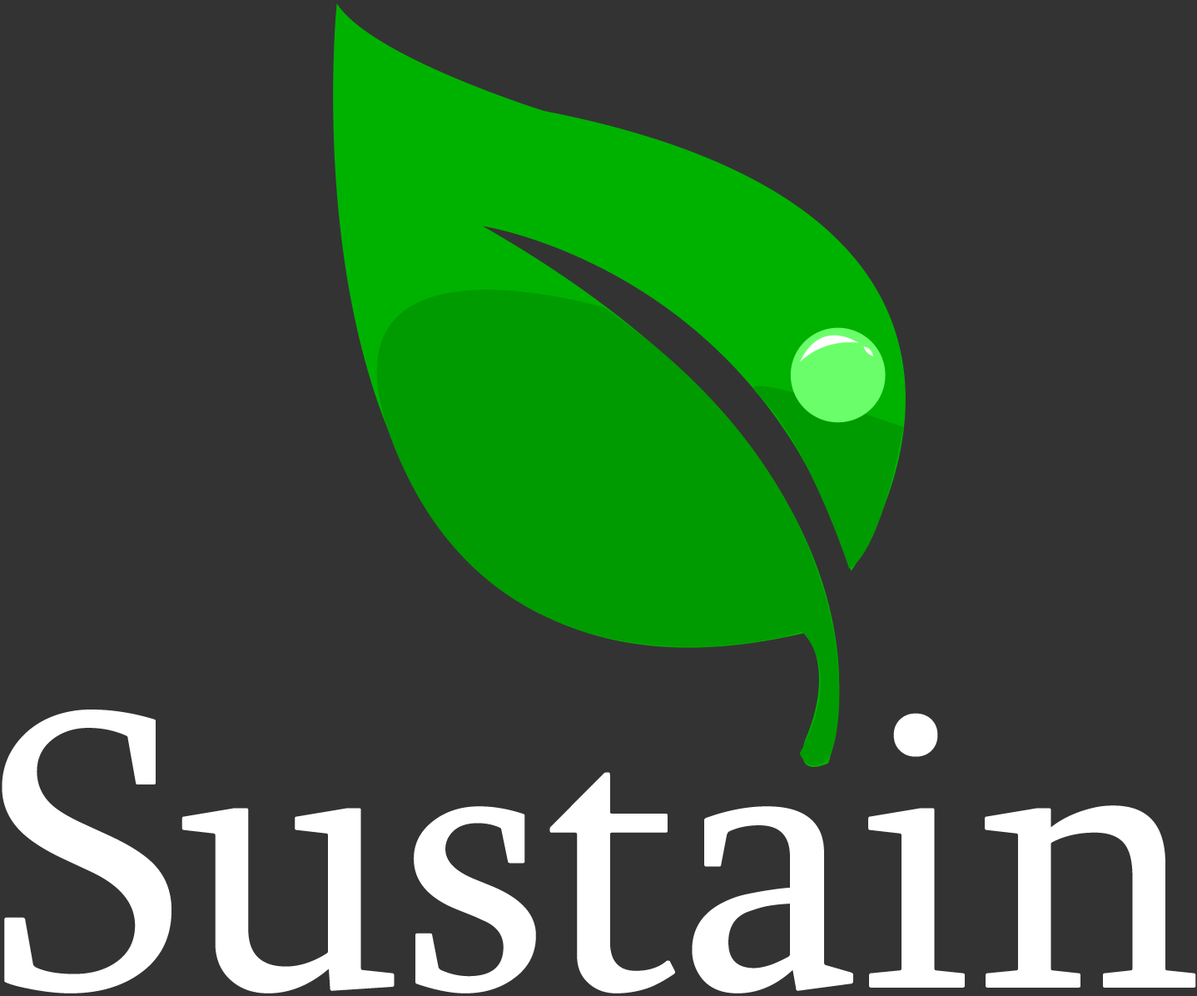
<style>
.page{position:relative;width:1197px;height:996px;background:#333333}
.page>*{position:absolute;margin:0}
.t1{font:403.9px "Sylfaen";color:#ffffff}
</style>
<div class="page">
<p class="t1" style="left:2px;top:709px;width:1195px;height:284px">Sustain</p>
</div>
